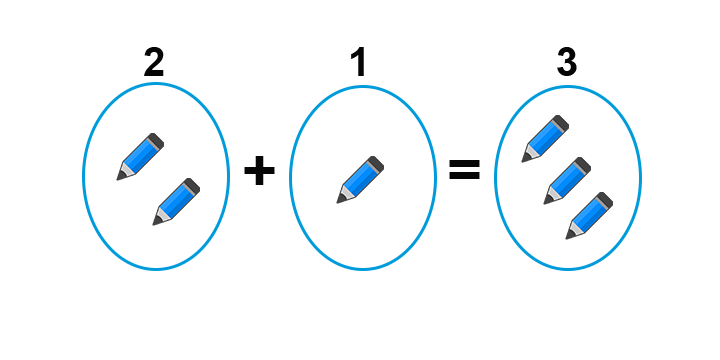
<style>
.page{position:relative;width:720px;height:360px;background:#ffffff}
.page>*{position:absolute;margin:0}
.t1{font:40px "Arial-BoldMT";color:#070606}
.t2{font:60px "Arial-BoldMT";color:#070606}
</style>
<div class="page">
<p class="t1" style="left:144px;top:47px;width:20px;height:29px">2</p>
<p class="t1" style="left:351px;top:47px;width:13px;height:29px">1</p>
<p class="t1" style="left:557px;top:47px;width:20px;height:29px">3</p>
<p class="t2" style="left:244px;top:156px;width:31px;height:29px">+</p>
<p class="t2" style="left:449px;top:160px;width:31px;height:19px">=</p>
</div>
